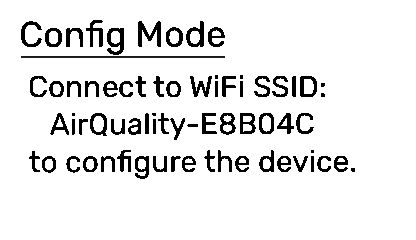
<style>
.page{position:relative;width:416px;height:240px;background:#ffffff}
.page>*{position:absolute;margin:0}
.t1{font:36px "RubikLight-Regular";color:#000000}
.t2{font:30px "RubikLight-Regular";color:#000000}
</style>
<div class="page">
<p class="t1" style="left:21px;top:20px;width:204px;height:35px">Config Mode</p>
<p class="t2" style="left:30px;top:75px;width:295px;height:22px">Connect to WiFi SSID:</p>
<p class="t2" style="left:50px;top:112px;width:264px;height:28px">AirQuality-E8B04C</p>
<p class="t2" style="left:29px;top:149px;width:326px;height:30px">to configure the device.</p>
</div>
